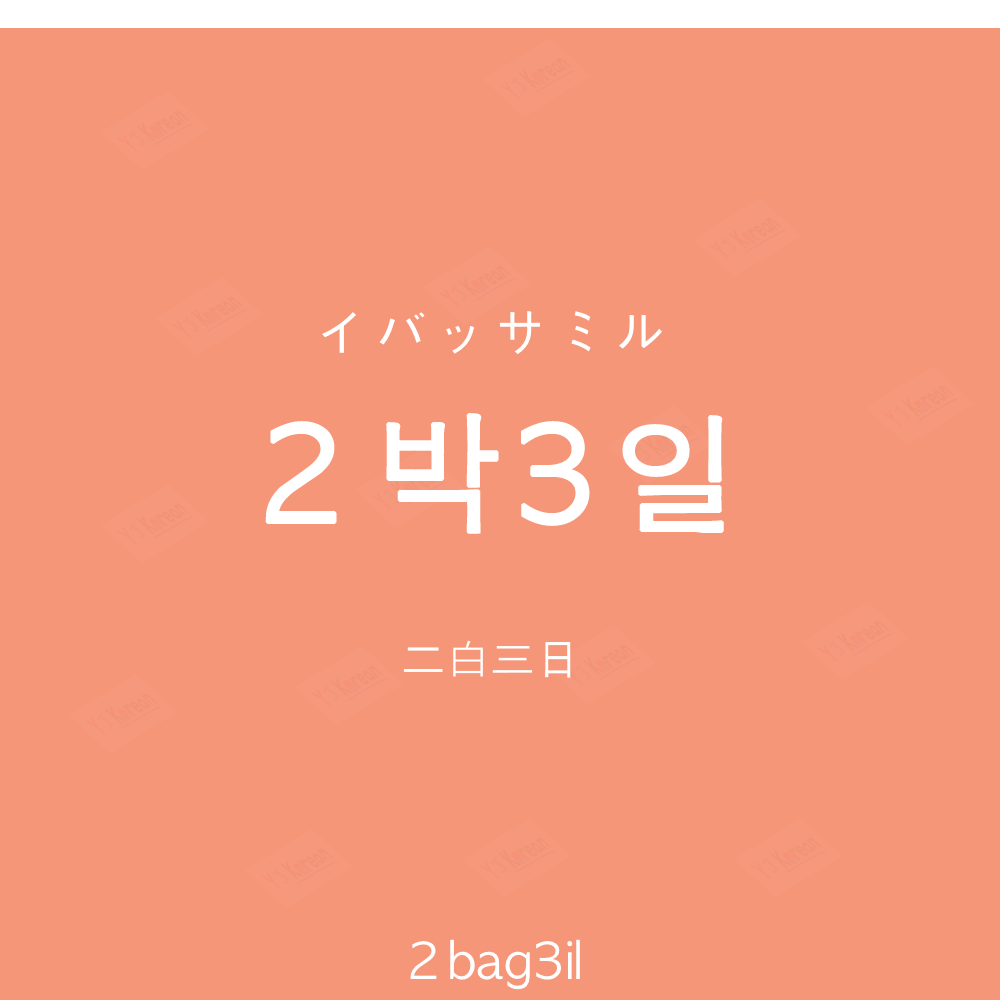
<style>
.page{position:relative;width:1000px;height:1000px;background:#f69679}
.page>*{position:absolute;margin:0}
.t1{font:60px "AppleGothic";color:#ffffff}
.t2{font:130px "AppleGothic";letter-spacing:0.04em;color:#ffffff;font-weight:bold}
.t3{font:45px "AppleGothic";color:#ffffff}
.t4{font:50px "AppleGothic";color:#ffffff}
</style>
<div class="page">
<p class="t1" style="left:322px;top:311px;width:340px;height:44px">イバッサミル</p>
<p class="t2" style="left:265px;top:413px;width:459px;height:121px">２박3일</p>
<p class="t3" style="left:403px;top:640px;width:168px;height:38px">二白三日</p>
<p class="t4" style="left:410px;top:939px;width:170px;height:51px">２bag3il</p>
</div>
